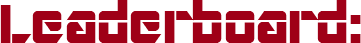
<style>
.page{position:relative;width:361px;height:43px;background:#9f0017}
.page>*{position:absolute;margin:0}
.t1{font:60px "ARDESTINE";color:#9f0017}
</style>
<div class="page">
<p class="t1" style="left:0px;top:0px;width:361px;height:43px">Leaderboard:</p>
</div>
